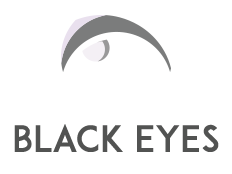
<style>
.page{position:relative;width:232px;height:174px;background:#ffffff}
.page>*{position:absolute;margin:0}
.t1{font:36px "ADAM.CGPRO";color:#525352}
</style>
<div class="page">
<p class="t1" style="left:14px;top:124px;width:205px;height:28px">BLACK EYES</p>
</div>
